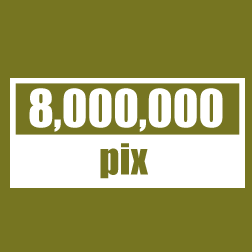
<style>
.page{position:relative;width:252px;height:252px;background:#767521}
.page>*{position:absolute;margin:0}
.t1{font:48px "Impact";color:#ffffff}
.t2{font:39.6px "Impact";color:#767521}
</style>
<div class="page">
<p class="t1" style="left:29px;top:88px;width:194px;height:44px">8,000,000</p>
<p class="t2" style="left:100px;top:143px;width:48px;height:36px">pix</p>
</div>
